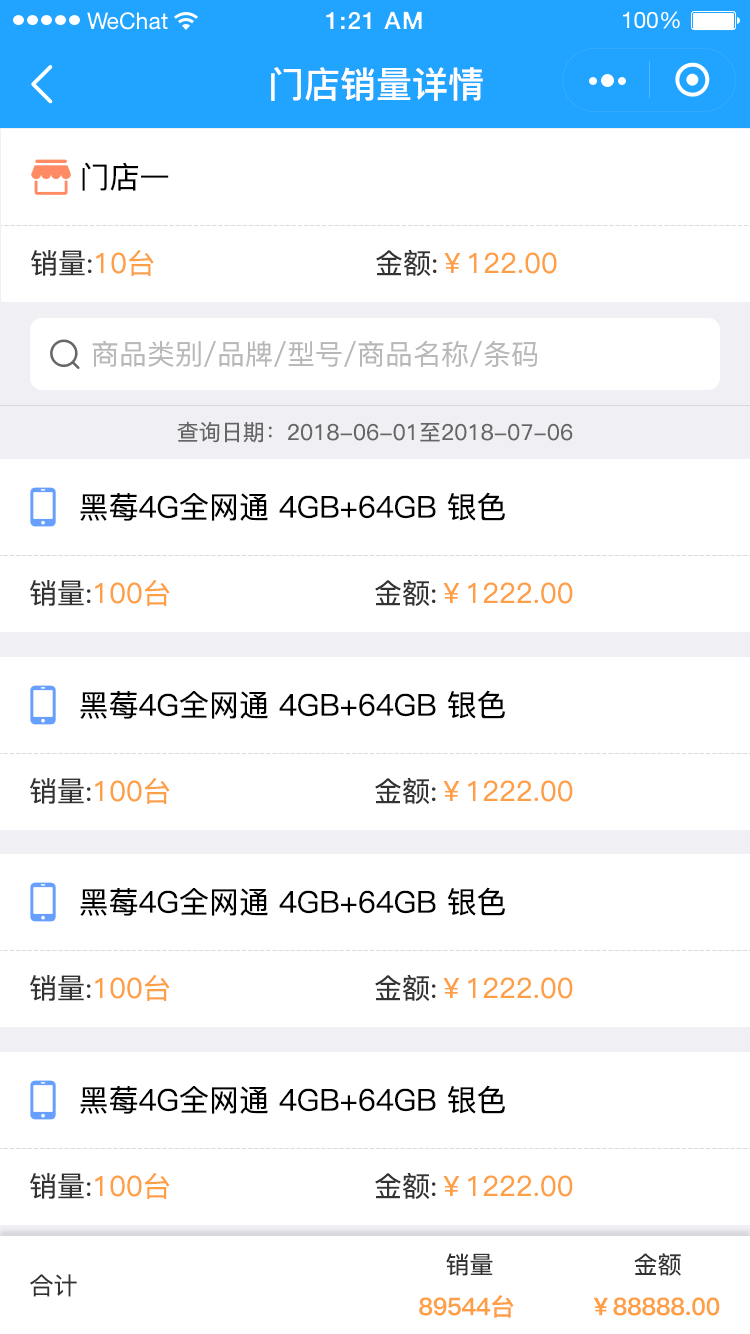
<style>
.page{position:relative;width:750px;height:1334px;background:#ffffff}
.page>*{position:absolute;margin:0}
.t1{font:36px "PingFang-SC-Bold";color:#ffffff}
.t2{font:30px "PingFang-SC-Medium";color:#000000}
.t3{font:28px "PingFang-SC-Medium";color:#333333}
.t4{font:28px "PingFang-SC-Medium";color:#fe9f45}
.t5{font:28px "PingFang-SC-Medium";color:#b8b8b8}
.t6{font:22px "PingFang-SC-Medium";color:#666666}
.t7{font:24px "PingFang-SC-Medium";color:#333333}
.t8{font:24px "PingFang-SC-Bold";color:#fe9f45}
</style>
<div class="page">
<p class="t1" style="left:271px;top:67px;width:212px;height:34px">门店销量详情</p>
<p class="t2" style="left:82px;top:162px;width:87px;height:29px">门店一</p>
<p class="t3" style="left:31px;top:250px;width:123px;height:26px">销量:<span class="t4">10台</span></p>
<p class="t4" style="left:376px;top:249px;width:181px;height:27px"><span class="t3">金额:</span>￥122.00</p>
<p class="t5" style="left:92px;top:340px;width:445px;height:27px">商品类别/品牌/型号/商品名称/条码</p>
<p class="t6" style="left:177px;top:421px;width:396px;height:22px">查询日期：2018-06-01至2018-07-06</p>
<p class="t2" style="left:80px;top:492px;width:425px;height:29px">黑莓4G全网通 4GB+64GB 银色</p>
<p class="t4" style="left:30px;top:580px;width:140px;height:26px"><span class="t3">销量:</span>100台</p>
<p class="t4" style="left:375px;top:579px;width:198px;height:27px"><span class="t3">金额:</span>￥1222.00</p>
<p class="t2" style="left:80px;top:690px;width:425px;height:29px">黑莓4G全网通 4GB+64GB 银色</p>
<p class="t4" style="left:30px;top:778px;width:140px;height:26px"><span class="t3">销量:</span>100台</p>
<p class="t4" style="left:375px;top:777px;width:198px;height:27px"><span class="t3">金额:</span>￥1222.00</p>
<p class="t2" style="left:80px;top:887px;width:425px;height:29px">黑莓4G全网通 4GB+64GB 银色</p>
<p class="t4" style="left:30px;top:975px;width:140px;height:26px"><span class="t3">销量:</span>100台</p>
<p class="t4" style="left:375px;top:974px;width:198px;height:27px"><span class="t3">金额:</span>￥1222.00</p>
<p class="t2" style="left:80px;top:1085px;width:425px;height:29px">黑莓4G全网通 4GB+64GB 银色</p>
<p class="t4" style="left:30px;top:1173px;width:140px;height:26px"><span class="t3">销量:</span>100台</p>
<p class="t4" style="left:375px;top:1172px;width:198px;height:27px"><span class="t3">金额:</span>￥1222.00</p>
<p class="t7" style="left:446px;top:1253px;width:47px;height:23px">销量</p>
<p class="t7" style="left:634px;top:1253px;width:47px;height:23px">金额</p>
<p class="t7" style="left:30px;top:1274px;width:47px;height:23px">合计</p>
<p class="t8" style="left:419px;top:1295px;width:95px;height:23px">89544台</p>
<p class="t8" style="left:593px;top:1297px;width:127px;height:19px">￥88888.00</p>
</div>
